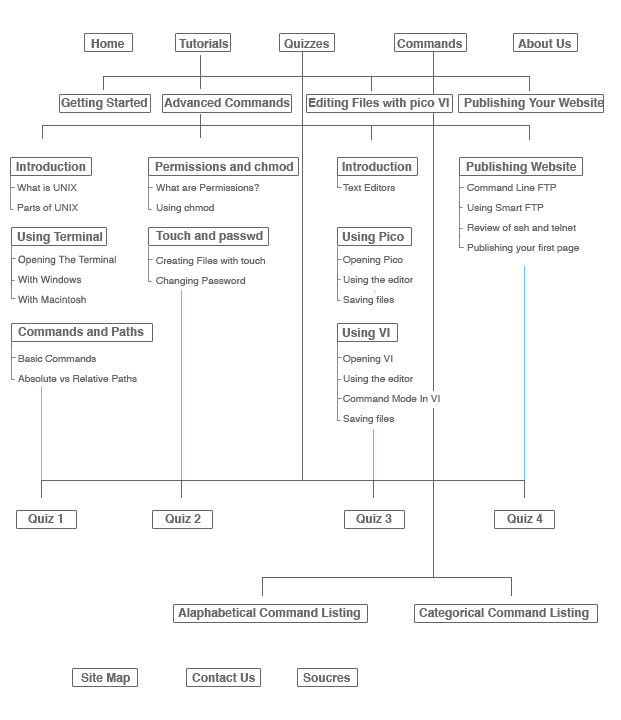
<style>
.page{position:relative;width:621px;height:720px;background:#ffffff}
.page>*{position:absolute;margin:0}
.t1{font:12px "Helvetica-Bold";color:#666666}
.t2{font:10px/20px "Helvetica";color:#666666}
.t3{font:10px "Helvetica";color:#666666}
</style>
<div class="page">
<p class="t1" style="left:91px;top:39px;width:34px;height:9px">Home</p>
<p class="t1" style="left:179px;top:39px;width:50px;height:9px">Tutorials</p>
<p class="t1" style="left:284px;top:39px;width:45px;height:10px">Quizzes</p>
<p class="t1" style="left:397px;top:39px;width:65px;height:9px">Commands</p>
<p class="t1" style="left:518px;top:39px;width:53px;height:9px">About Us</p>
<p class="t1" style="left:61px;top:98px;width:86px;height:12px">Getting Started</p>
<p class="t1" style="left:164px;top:98px;width:126px;height:9px">Advanced Commands</p>
<p class="t1" style="left:308px;top:98px;width:141px;height:12px">Editing Files with pico VI</p>
<p class="t1" style="left:464px;top:98px;width:140px;height:12px">Publishing Your Website</p>
<p class="t1" style="left:16px;top:162px;width:70px;height:9px">Introduction</p>
<p class="t1" style="left:155px;top:162px;width:138px;height:9px">Permissions and chmod</p>
<p class="t1" style="left:342px;top:162px;width:70px;height:9px">Introduction</p>
<p class="t1" style="left:466px;top:162px;width:111px;height:12px">Publishing Website</p>
<p class="t2" style="left:17px;top:184px;width:61px;height:27px">What is UNIX<br>Parts of UNIX</p>
<p class="t2" style="left:156px;top:184px;width:103px;height:29px">What are Permissions?<br>Using chmod</p>
<p class="t3" style="left:343px;top:184px;width:52px;height:8px">Text Editors</p>
<p class="t2" style="left:467px;top:184px;width:112px;height:69px">Command Line FTP<br>Using Smart FTP<br>Review of ssh and telnet<br>Publishing your first page</p>
<p class="t1" style="left:17px;top:232px;width:86px;height:12px">Using Terminal</p>
<p class="t1" style="left:156px;top:231px;width:107px;height:12px">Touch and passwd</p>
<p class="t1" style="left:342px;top:232px;width:62px;height:12px">Using Pico</p>
<p class="t2" style="left:18px;top:255px;width:98px;height:49px">Opening The Terminal<br>With Windows<br>With Macintosh</p>
<p class="t2" style="left:156px;top:257px;width:109px;height:29px">Creating Files with touch<br>Changing Password</p>
<p class="t2" style="left:343px;top:256px;width:70px;height:49px">Opening Pico<br>Using the editor<br>Saving files</p>
<p class="t1" style="left:18px;top:327px;width:126px;height:9px">Commands and Paths</p>
<p class="t1" style="left:342px;top:328px;width:48px;height:12px">Using VI</p>
<p class="t2" style="left:18px;top:355px;width:119px;height:27px">Basic Commands<br>Absolute vs Relative Paths</p>
<p class="t2" style="left:343px;top:355px;width:97px;height:69px">Opening VI<br>Using the editor<br>Command Mode In VI<br>Saving files</p>
<p class="t1" style="left:28px;top:514px;width:34px;height:10px">Quiz 1</p>
<p class="t1" style="left:165px;top:514px;width:36px;height:10px">Quiz 2</p>
<p class="t1" style="left:356px;top:514px;width:36px;height:10px">Quiz 3</p>
<p class="t1" style="left:507px;top:514px;width:36px;height:10px">Quiz 4</p>
<p class="t1" style="left:178px;top:608px;width:182px;height:12px">Alaphabetical Command Listing</p>
<p class="t1" style="left:419px;top:608px;width:170px;height:12px">Categorical Command Listing</p>
<p class="t1" style="left:81px;top:673px;width:49px;height:12px">Site Map</p>
<p class="t1" style="left:192px;top:673px;width:63px;height:9px">Contact Us</p>
<p class="t1" style="left:303px;top:673px;width:47px;height:9px">Soucres</p>
</div>
